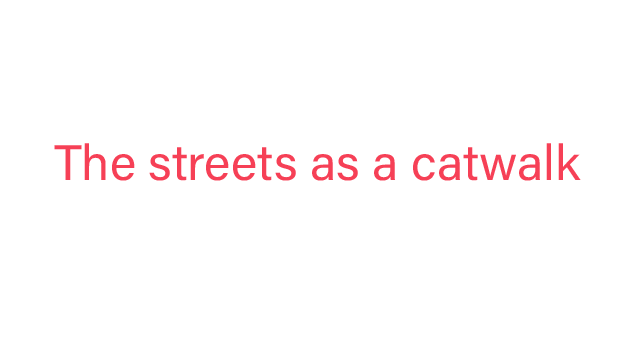
<style>
.page{position:relative;width:640px;height:360px;background:#ffffff}
.page>*{position:absolute;margin:0}
.t1{font:50px "AcuminConcept-Regular";color:#f64056}
</style>
<div class="page">
<p class="t1" style="left:54px;top:143px;width:527px;height:38px">The streets as a catwalk</p>
</div>
